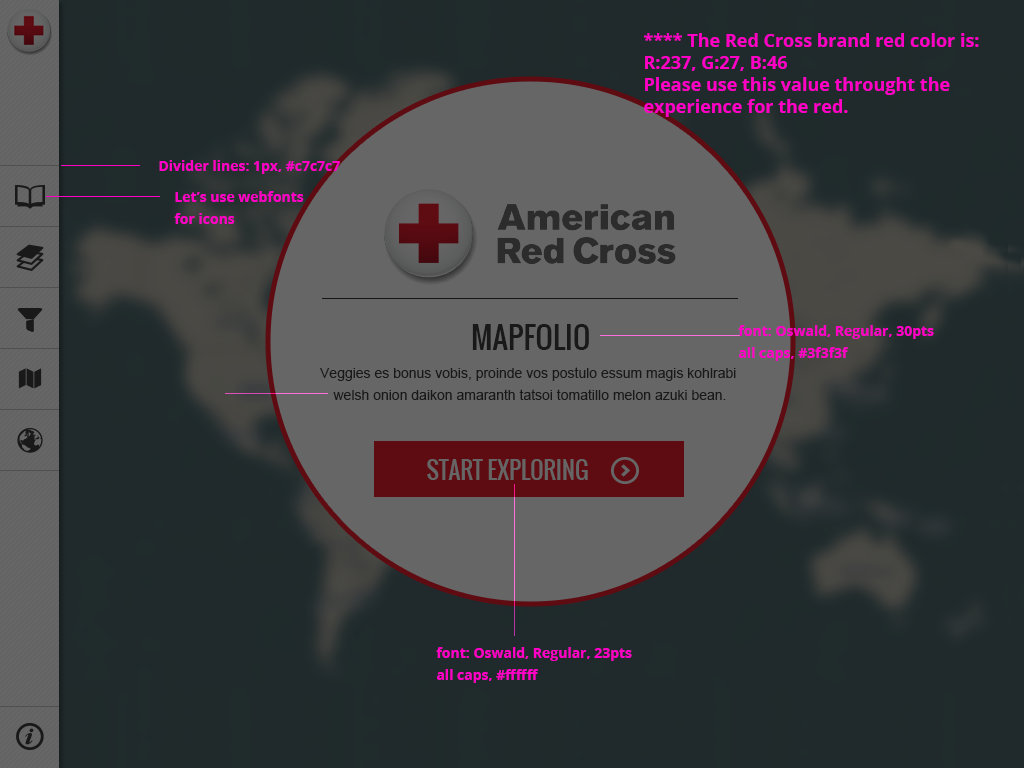
<style>
.page{position:relative;width:1024px;height:768px;background:#202a2c}
.page>*{position:absolute;margin:0}
.t1{font:18px/22px "OpenSans-Bold";color:#ff00c6}
.t2{font:14px "OpenSans-Bold";color:#ff00c6}
.t3{font:14px/22px "OpenSans-Bold";color:#ff00c6}
.t4{font:30.2px "Oswald-Regular";color:#191919}
.t5{font:14px/22px "ArialMT";color:#191919}
.t6{font:23px "Oswald-Regular";color:#666666}
</style>
<div class="page">
<p class="t1" style="left:644px;top:33px;width:335px;height:84px">**** The Red Cross brand red color is:<br>R:237, G:27, B:46<br>Please use this value throught the<br>experience for the red.</p>
<p class="t2" style="left:159px;top:160px;width:181px;height:14px">Divider lines: 1px, #c7c7c7</p>
<p class="t3" style="left:174px;top:191px;width:130px;height:33px">Let’s use webfonts<br>for icons</p>
<p class="t4" style="left:472px;top:324px;width:117px;height:26px">MAPFOLIO</p>
<p class="t3" style="left:738px;top:325px;width:196px;height:36px">font: Oswald, Regular, 30pts<br>all caps, #3f3f3f</p>
<p class="t5" style="left:320px;top:367px;width:416px;height:33px;text-align:center">Veggies es bonus vobis, proinde vos postulo essum magis kohlrabi <br>welsh onion daikon amaranth tatsoi tomatillo melon azuki bean.</p>
<p class="t6" style="left:427px;top:459px;width:161px;height:21px">START EXPLORING</p>
<p class="t3" style="left:436px;top:647px;width:196px;height:36px">font: Oswald, Regular, 23pts<br>all caps, #ffffff</p>
</div>
